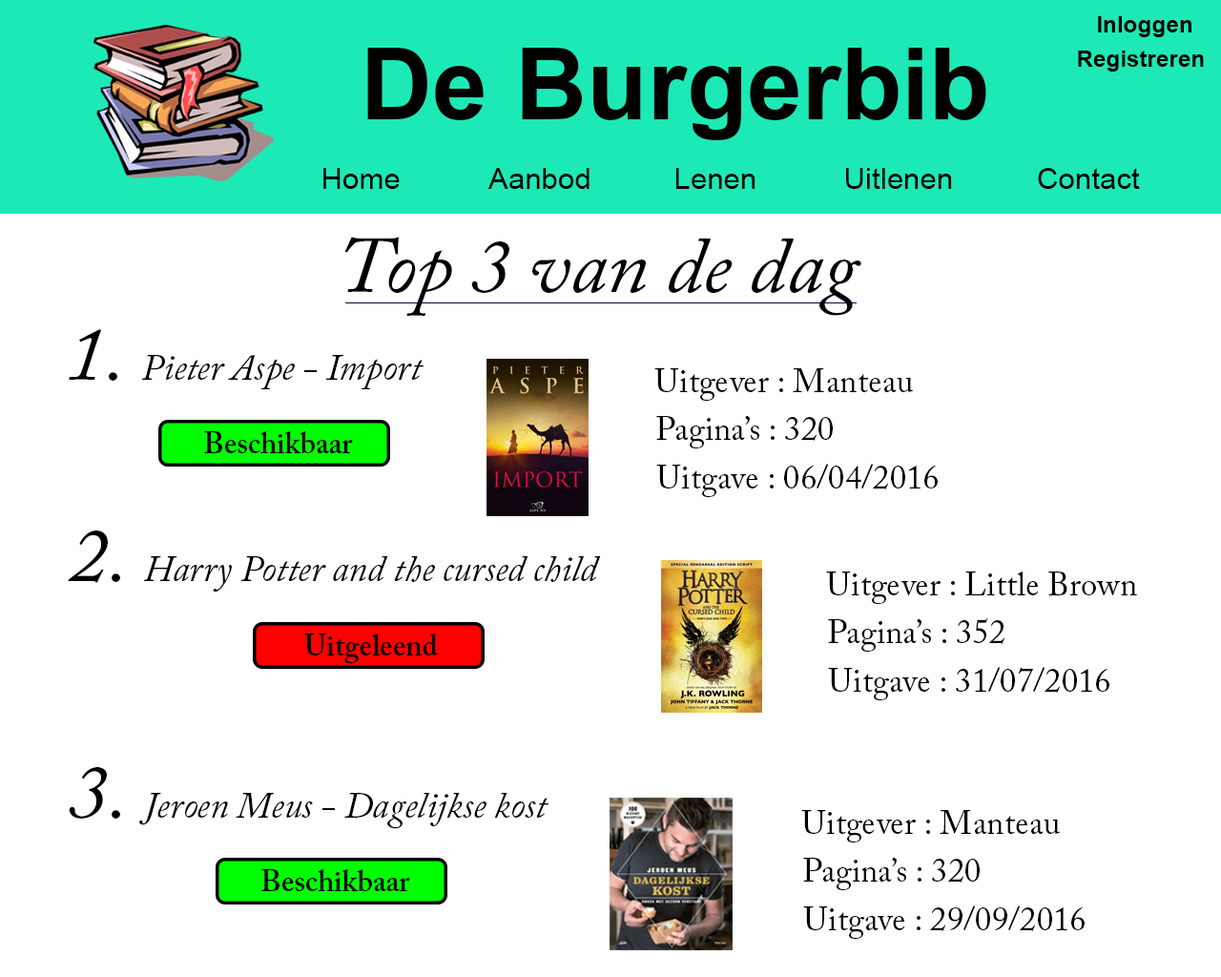
<style>
.page{position:relative;width:1221px;height:977px;background:#ffffff}
.page>*{position:absolute;margin:0}
.t1{font:23.2px "Arial-BoldMT";color:#000000}
.t2{font:99.4px "Arial-BoldMT";color:#000000}
.t3{font:29.8px "ArialMT";color:#000000}
.t4{font:79.5px "ACaslonPro-Italic";color:#000000}
.t5{font:36.4px "ACaslonPro-Italic";color:#000000}
.t6{font:33.1px "ACaslonPro-Regular";color:#000000}
.t7{font:29.8px "ACaslonPro-Semibold";color:#000000}
</style>
<div class="page">
<p class="t1" style="left:1098px;top:16px;width:93px;height:21px">Inloggen</p>
<p class="t2" style="left:367px;top:48px;width:619px;height:92px">De Burgerbib</p>
<p class="t1" style="left:1078px;top:51px;width:126px;height:21px">Registreren</p>
<p class="t3" style="left:323px;top:168px;width:77px;height:21px">Home</p>
<p class="t3" style="left:487px;top:168px;width:102px;height:21px">Aanbod</p>
<p class="t3" style="left:675px;top:168px;width:80px;height:21px">Lenen</p>
<p class="t3" style="left:846px;top:168px;width:106px;height:21px">Uitlenen</p>
<p class="t3" style="left:1038px;top:168px;width:102px;height:21px">Contact</p>
<p class="t4" style="left:344px;top:237px;width:517px;height:79px">Top 3 van de dag</p>
<p class="t5" style="left:69px;top:329px;width:354px;height:60px"><span class="t4">1. </span>Pieter Aspe - Import</p>
<p class="t6" style="left:654px;top:368px;width:260px;height:33px">Uitgever : Manteau</p>
<p class="t6" style="left:656px;top:416px;width:177px;height:32px">Pagina’s : 320</p>
<p class="t7" style="left:204px;top:431px;width:149px;height:22px">Beschikbaar</p>
<p class="t6" style="left:656px;top:464px;width:282px;height:33px">Uitgave : 06/04/2016</p>
<p class="t5" style="left:68px;top:530px;width:533px;height:62px"><span class="t4">2. </span>Harry Potter and the cursed child</p>
<p class="t6" style="left:826px;top:571px;width:311px;height:33px">Uitgever : Little Brown</p>
<p class="t6" style="left:828px;top:618px;width:176px;height:33px">Pagina’s : 352</p>
<p class="t7" style="left:304px;top:633px;width:134px;height:31px">Uitgeleend</p>
<p class="t6" style="left:828px;top:667px;width:281px;height:33px">Uitgave : 31/07/2016</p>
<p class="t5" style="left:69px;top:767px;width:479px;height:62px"><span class="t4">3. </span>Jeroen Meus - Dagelijkse kost</p>
<p class="t6" style="left:801px;top:810px;width:260px;height:32px">Uitgever : Manteau</p>
<p class="t6" style="left:803px;top:857px;width:177px;height:33px">Pagina’s : 320</p>
<p class="t7" style="left:261px;top:869px;width:149px;height:22px">Beschikbaar</p>
<p class="t6" style="left:803px;top:905px;width:281px;height:34px">Uitgave : 29/09/2016</p>
</div>
